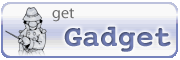
<style>
.page{position:relative;width:180px;height:60px;background:#f9f9f9}
.page>*{position:absolute;margin:0}
.t1{font:16px "Myriad-Roman";color:#6d6d6d}
.t2{font:30px "Courier-Bold";color:#6772a4}
</style>
<div class="page">
<p class="t1" style="left:52px;top:8px;width:22px;height:14px">get</p>
<p class="t2" style="left:64px;top:26px;width:107px;height:26px">Gadget</p>
</div>
